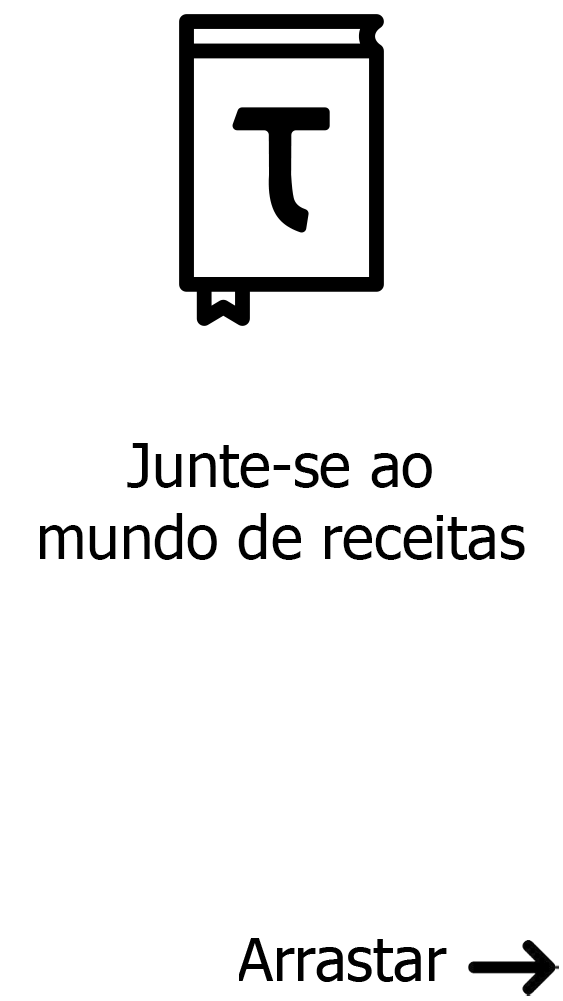
<style>
.page{position:relative;width:563px;height:1001px;background:#ffffff}
.page>*{position:absolute;margin:0}
.t1{font:60px "Tahoma";color:#000000}
</style>
<div class="page">
<p class="t1" style="left:40px;top:443px;width:485px;height:117px;text-align:center">Junte-se ao<br>mundo de receitas</p>
</div>
